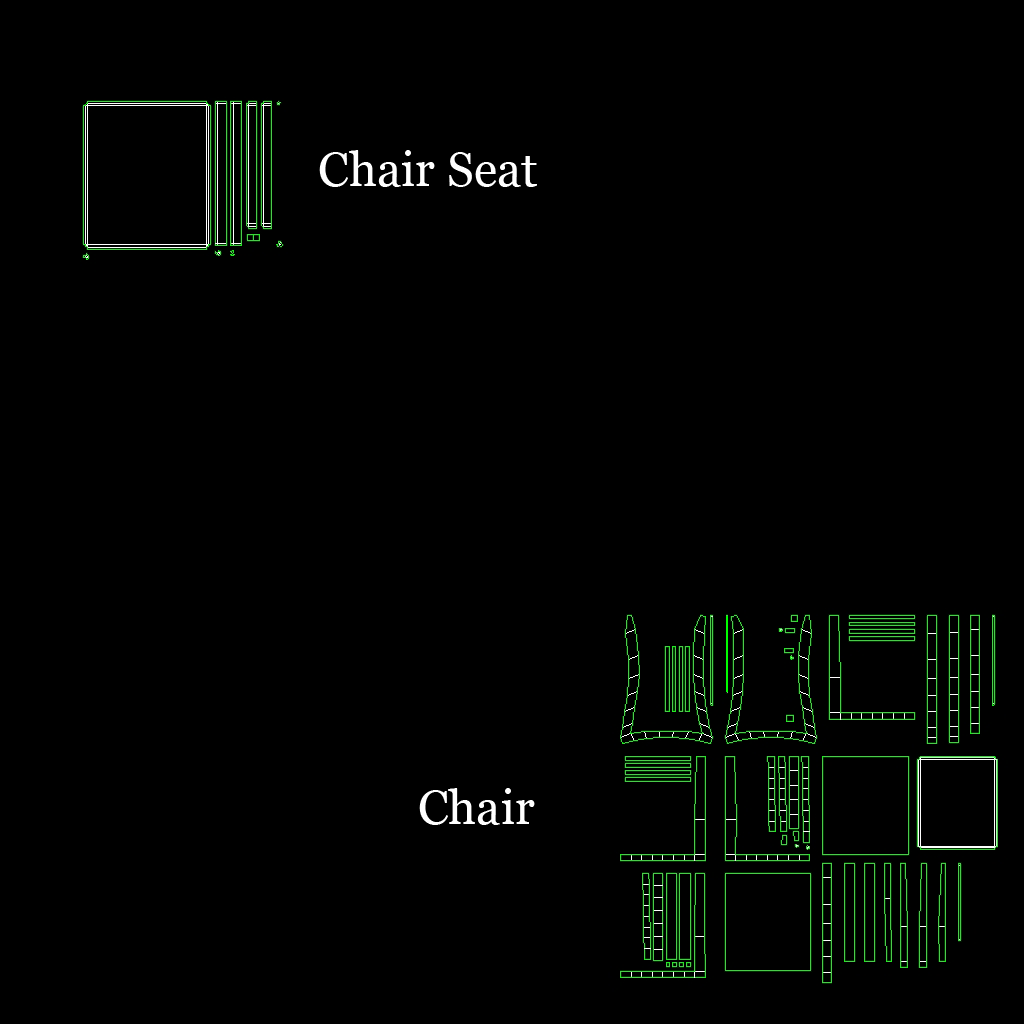
<style>
.page{position:relative;width:1024px;height:1024px;background:#000000}
.page>*{position:absolute;margin:0}
.t1{font:48px "Georgia";color:#ffffff}
</style>
<div class="page">
<p class="t1" style="left:319px;top:150px;width:218px;height:37px">Chair Seat</p>
<p class="t1" style="left:419px;top:788px;width:116px;height:37px">Chair</p>
</div>
